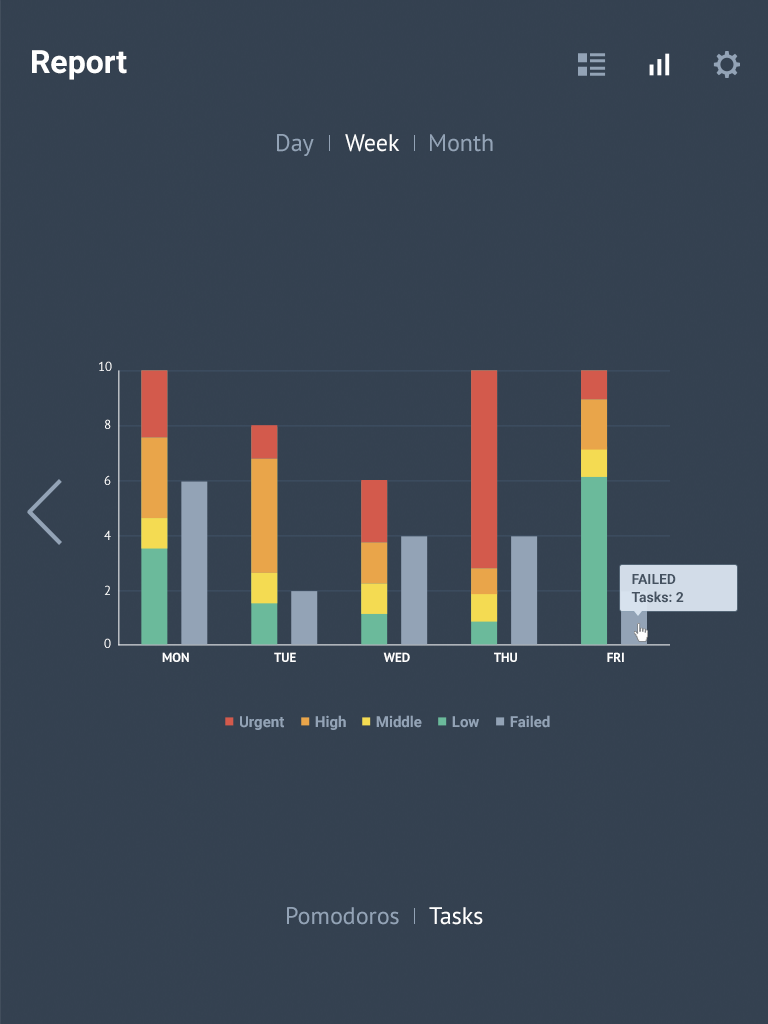
<style>
.page{position:relative;width:768px;height:1024px;background:#344150}
.page>*{position:absolute;margin:0}
.t1{font:32px "Roboto-Bold";color:#ffffff}
.t2{font:24px "PTSans-Regular";color:#93a3b6}
.t3{font:24px "PTSans-Regular";color:#ffffff}
.t4{font:13px "PTSans-Regular";color:#ffffff}
.t5{font:14px "Roboto-Bold";color:#455261}
.t6{font:13px "PTSans-Bold";color:#ffffff}
.t7{font:15px "Roboto-Bold";color:#93a3b6}
</style>
<div class="page">
<p class="t1" style="left:32px;top:50px;width:95px;height:30px">Report</p>
<p class="t2" style="left:277px;top:134px;width:37px;height:22px">Day</p>
<p class="t3" style="left:345px;top:134px;width:55px;height:18px">Week</p>
<p class="t2" style="left:430px;top:134px;width:63px;height:18px">Month</p>
<p class="t4" style="left:99px;top:361px;width:13px;height:10px">10</p>
<p class="t4" style="left:105px;top:419px;width:6px;height:10px">8</p>
<p class="t4" style="left:104px;top:475px;width:7px;height:10px">6</p>
<p class="t4" style="left:104px;top:530px;width:7px;height:10px">4</p>
<p class="t5" style="left:632px;top:574px;width:44px;height:10px">FAILED</p>
<p class="t4" style="left:104px;top:585px;width:6px;height:10px">2</p>
<p class="t5" style="left:631px;top:591px;width:53px;height:12px">Tasks: 2</p>
<p class="t4" style="left:104px;top:638px;width:7px;height:10px">0</p>
<p class="t6" style="left:162px;top:652px;width:27px;height:10px">MON</p>
<p class="t6" style="left:274px;top:652px;width:22px;height:10px">TUE</p>
<p class="t6" style="left:383px;top:652px;width:27px;height:10px">WED</p>
<p class="t6" style="left:494px;top:652px;width:23px;height:10px">THU</p>
<p class="t6" style="left:607px;top:652px;width:17px;height:10px">FRI</p>
<p class="t7" style="left:240px;top:716px;width:44px;height:14px">Urgent</p>
<p class="t7" style="left:315px;top:715px;width:31px;height:15px">High</p>
<p class="t7" style="left:376px;top:715px;width:46px;height:13px">Middle</p>
<p class="t7" style="left:452px;top:716px;width:27px;height:12px">Low</p>
<p class="t7" style="left:510px;top:715px;width:40px;height:13px">Failed</p>
<p class="t2" style="left:287px;top:907px;width:112px;height:18px">Pomodoros</p>
<p class="t3" style="left:429px;top:907px;width:54px;height:18px">Tasks</p>
</div>
